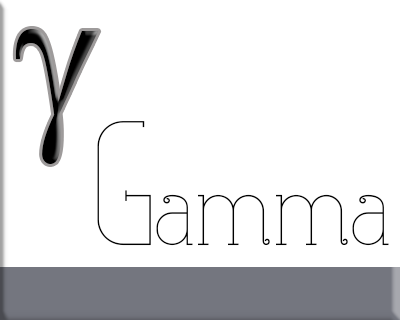
<style>
.page{position:relative;width:400px;height:320px;background:#ffffff}
.page>*{position:absolute;margin:0}
.t1{font:200px "Matilde";color:#000000}
</style>
<div class="page">
<p class="t1" style="left:97px;top:121px;width:292px;height:125px">Gamma</p>
</div>
